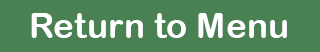
<style>
.page{position:relative;width:320px;height:52px;background:#498153}
.page>*{position:absolute;margin:0}
.t1{font:35.4px "ArialRoundedMTBold";color:#ffffff}
</style>
<div class="page">
<p class="t1" style="left:31px;top:13px;width:256px;height:25px">Return to Menu</p>
</div>
